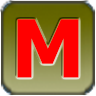
<style>
.page{position:relative;width:96px;height:96px;background:#ff0000}
.page>*{position:absolute;margin:0}
.t1{font:80px "Verdana-Bold";color:#ff0000}
</style>
<div class="page">
<p class="t1" style="left:17px;top:19px;width:62px;height:59px">M</p>
</div>
